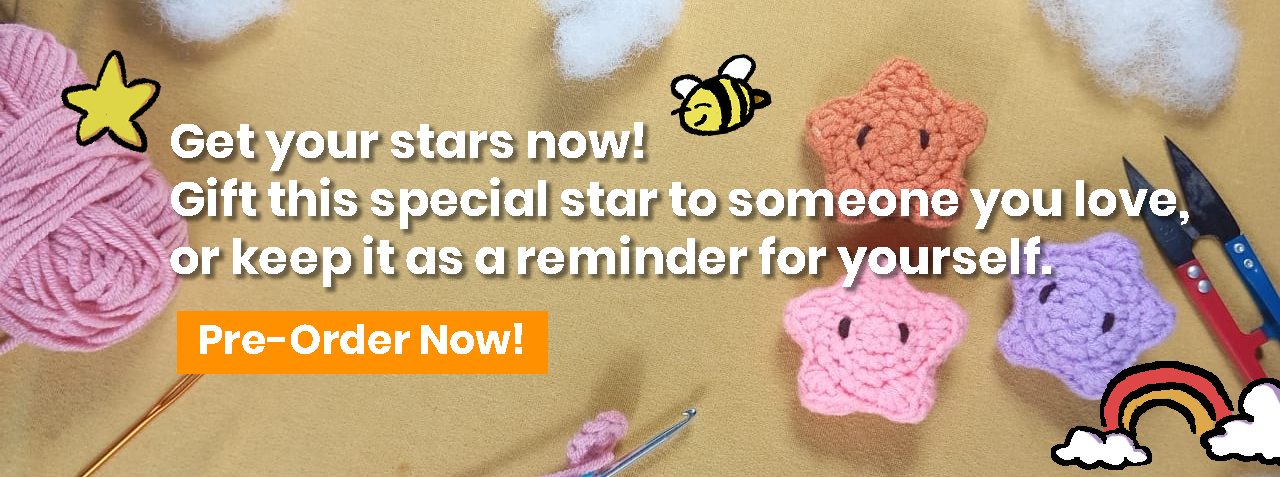
<style>
.page{position:relative;width:1280px;height:477px}
.page>*{position:absolute;margin:0}
.t1{font:48.3px "Poppins-Bold";color:#ffffff}
.t2{font:41.1px "Poppins-Bold";color:#ffffff}
</style>
<div class="page">
<p class="t1" style="left:170px;top:122px;width:1019px;height:165px">Get your stars now!<br>Gift this special star to someone you love, <br>or keep it as a reminder for yourself.</p>
<p class="t2" style="left:200px;top:323px;width:322px;height:31px">Pre-Order Now!</p>
</div>
